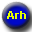
<style>
.page{position:relative;width:32px;height:32px}
.page>*{position:absolute;margin:0}
.t1{font:11px "Arial-BoldMT";color:#e4ff00}
</style>
<div class="page">
<p class="t1" style="left:7px;top:11px;width:19px;height:8px">Arh</p>
</div>
